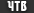
<style>
.page{position:relative;width:34px;height:13px;background:#333333}
.page>*{position:absolute;margin:0}
.t1{font:13.9px "NK_04";color:#ffffff}
</style>
<div class="page">
<p class="t1" style="left:7px;top:1px;width:20px;height:10px">ЧТВ</p>
</div>
